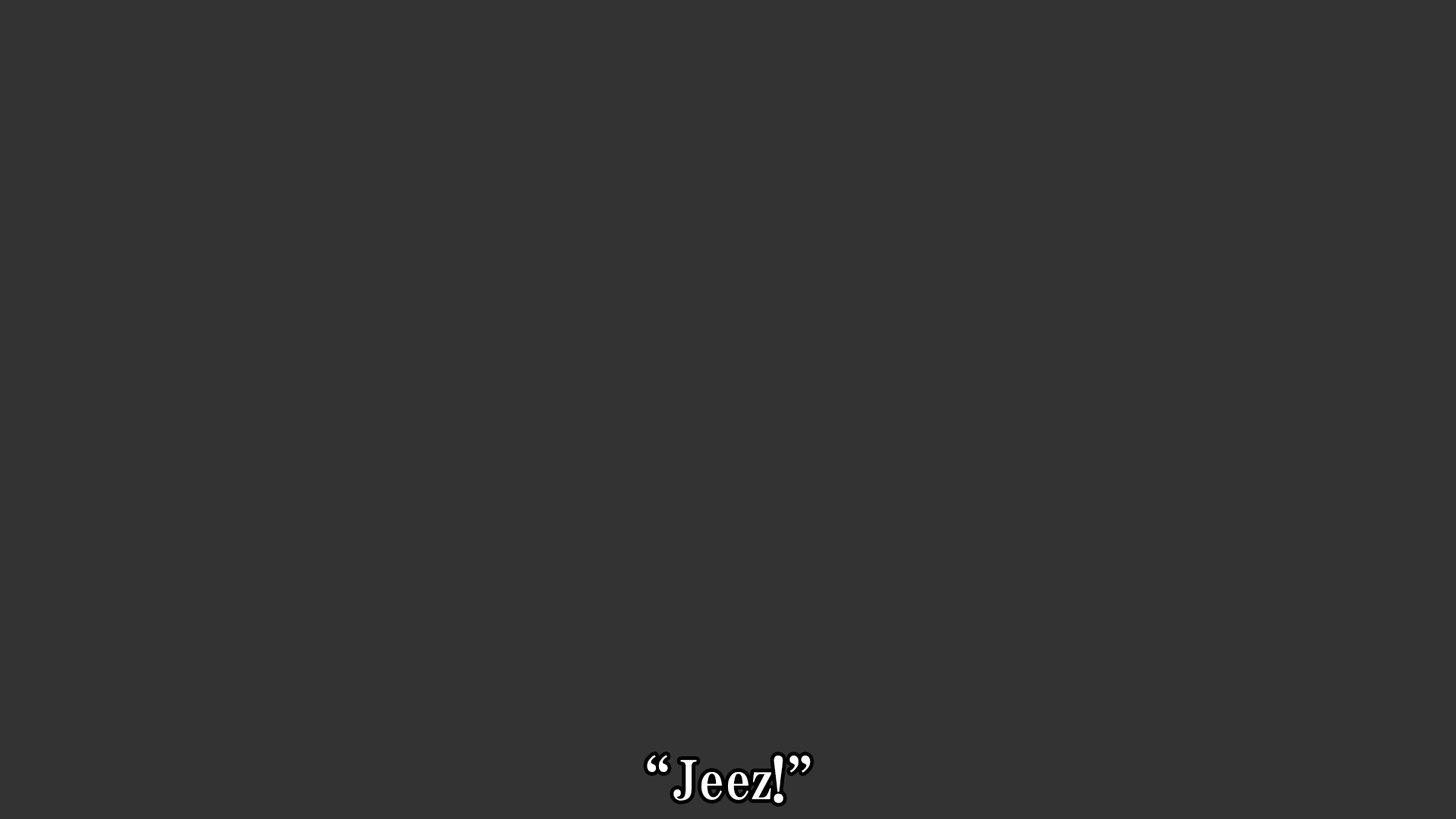
<style>
.page{position:relative;width:1456px;height:819px;background:#333333}
.page>*{position:absolute;margin:0}
.t1{font:53.1px "HGPMinchoE";letter-spacing:0.025em;color:#ffffff}
</style>
<div class="page">
<p class="t1" style="left:647px;top:755px;width:164px;height:48px">“Jeez!”</p>
</div>
